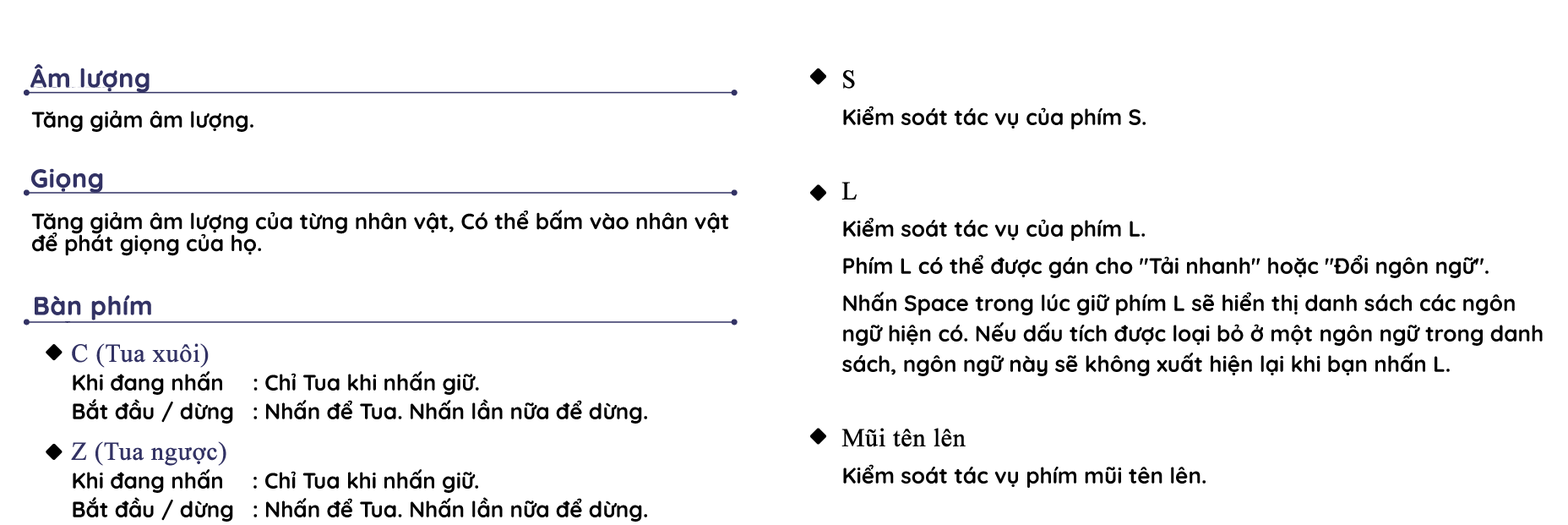
<style>
.page{position:relative;width:1568px;height:525px;background:#ffffff}
.page>*{position:absolute;margin:0}
.t1{font:25.3px "Quicksand-Bold";color:#323264;font-weight:bold}
.t2{font:22px/30.4px "Quicksand-Bold";color:#000000}
.t3{font:25.3px/30.4px "TimesNewRomanPSMT";color:#000000;font-weight:bold}
.t4{font:22px "Quicksand-Bold";color:#000000}
.t5{font:22px/22px "Quicksand-Bold";color:#000000}
.t6{font:25.3px/22px "TimesNewRomanPSMT";color:#323264;font-weight:bold}
.t7{font:25.3px/30.4px "TimesNewRomanPSMT";color:#323264;font-weight:bold}
.t8{font:25.3px/33.8px "TimesNewRomanPSMT";color:#323264;font-weight:bold}
</style>
<div class="page">
<p class="t1" style="left:30px;top:64px;width:120px;height:29px">Âm lượng</p>
<p class="t2" style="left:841px;top:70px;width:702px;height:417px"><span class="t3">S<br></span>Kiểm soát tác vụ của phím S.<br><br><span class="t3">L <br></span>Kiểm soát tác vụ của phím L.<br>Phím L có thể được gán cho "Tải nhanh" hoặc "Đổi ngôn ngữ".<br>Nhấn Space trong lúc giữ phím L sẽ hiển thị danh sách các ngôn  ngữ hiện có. Nếu dấu tích được loại bỏ ở một ngôn ngữ trong danh sách, ngôn ngữ này sẽ không xuất hiện lại khi bạn nhấn L.<br><br><span class="t3">Mũi tên lên<br></span>Kiểm soát tác vụ phím mũi tên lên.</p>
<p class="t4" style="left:31px;top:110px;width:222px;height:22px">Tăng giảm âm lượng.</p>
<p class="t1" style="left:31px;top:168px;width:72px;height:25px">Giọng</p>
<p class="t5" style="left:31px;top:210px;width:698px;height:46px">Tăng giảm âm lượng của từng nhân vật, Có thể bấm vào nhân vật để phát giọng của họ.</p>
<p class="t1" style="left:35px;top:295px;width:116px;height:25px">Bàn phím</p>
<p class="t5" style="left:71px;top:343px;width:576px;height:178px"><span class="t6">C (Tua xuôi)<br></span>Khi đang nhấn                  : Chỉ Tua khi nhấn giữ.<br>Bắt đầu / dừng   : Nhấn để Tua. Nhấn lần nữa để dừng.<br><span class="t7">Z</span><span class="t8"> (Tua n</span><span class="t7">g</span><span class="t6">ược)<br></span>Khi đang nhấn                                                                     : Chỉ Tua khi nhấn giữ.<br>Bắt đầu / dừng   : Nhấn để Tua. Nhấn lần nữa để dừng.</p>
</div>
